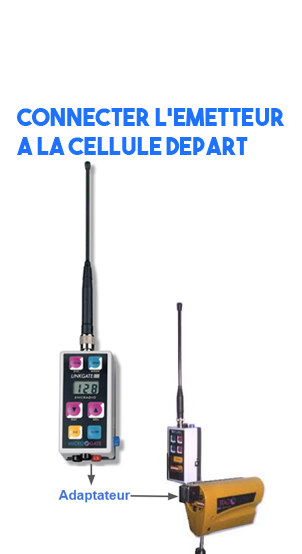
<style>
.page{position:relative;width:302px;height:554px;background:#ffffff}
.page>*{position:absolute;margin:0}
.t1{font:24px "TheBoldFont";color:#1f72fd}
</style>
<div class="page">
<p class="t1" style="left:17px;top:108px;width:268px;height:47px">Connecter l’Emetteur<br>a la cellule depart</p>
</div>
